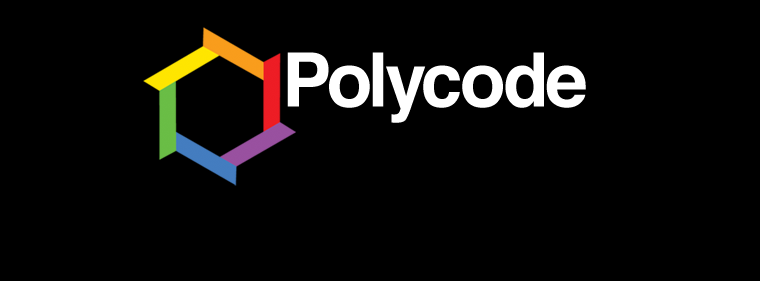
<style>
.page{position:relative;width:760px;height:281px;background:#000000}
.page>*{position:absolute;margin:0}
.t1{font:74.9px "Helvetica-Bold";color:#ffffff}
</style>
<div class="page">
<p class="t1" style="left:287px;top:52px;width:299px;height:71px">Polycode</p>
</div>
